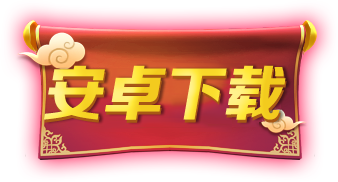
<style>
.page{position:relative;width:338px;height:182px}
.page>*{position:absolute;margin:0}
.t1{font:60px "FZZDHJW--GB1-0";font-style:italic}
</style>
<div class="page">
<p class="t1" style="left:44px;top:65px;width:242px;height:55px">安卓下载</p>
<p class="t1" style="left:45px;top:68px;width:242px;height:55px">安卓下载</p>
</div>
